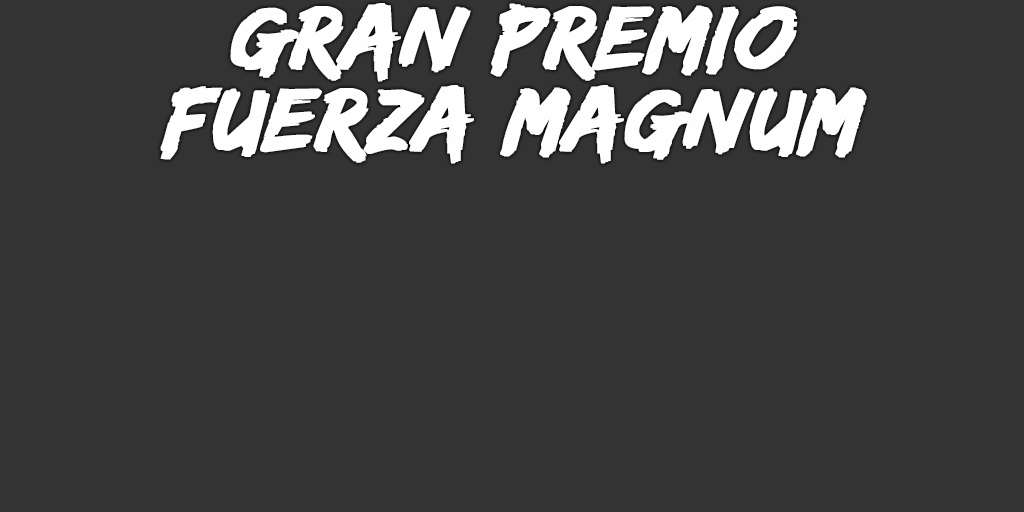
<style>
.page{position:relative;width:1024px;height:512px;background:#333333}
.page>*{position:absolute;margin:0}
.t1{font:93px/82px "EdoSZ";color:#fefefe;font-weight:bold;font-style:italic;scale:1.04 1}
</style>
<div class="page">
<p class="t1" style="left:160px;top:3px;width:707px;height:161px;text-align:center">gran premio<br>Fuerza Magnum</p>
</div>
